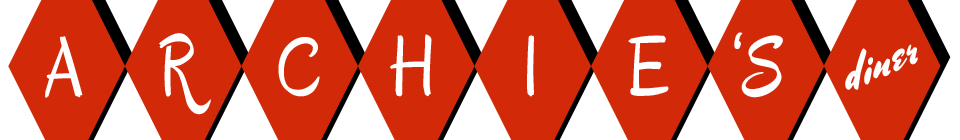
<style>
.page{position:relative;width:960px;height:140px;background:#d22a09}
.page>*{position:absolute;margin:0}
.t1{font:86.4px "Oregano-Regular";letter-spacing:0.05em;color:#ffffff;scale:0.83 1}
.t2{font:86.4px "Oregano-Regular";letter-spacing:0.06em;color:#ffffff;scale:0.83 1}
.t3{font:48px "MrSheppards";letter-spacing:0.03em;color:#ffffff;scale:0.87 1}
</style>
<div class="page">
<p class="t1" style="left:45px;top:33px;width:738px;height:82px">A    R     C    H    I    E    S</p>
<p class="t2" style="left:734px;top:32px;width:9px;height:17px">‘</p>
<p class="t3" style="left:845px;top:44px;width:73px;height:46px;rotate:-24deg">diner</p>
</div>
